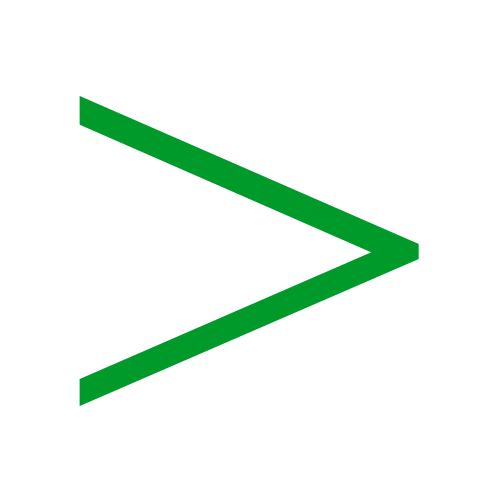
<style>
.page{position:relative;width:500px;height:500px;background:#ffffff}
.page>*{position:absolute;margin:0}
.t1{font:644.8px "TimesNewRomanPSMT";color:#009a2b}
</style>
<div class="page">
<p class="t1" style="left:79px;top:96px;width:340px;height:310px">&gt;</p>
</div>
